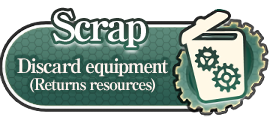
<style>
.page{position:relative;width:270px;height:117px;background:#ffffff}
.page>*{position:absolute;margin:0}
.t1{font:40px "RyuminPro-ExBold";letter-spacing:-0.08em;color:#ffffff}
.t2{font:16px/17px "RyuminPro-ExBold";letter-spacing:-0.08em;color:#fff6f1}
.t3{font:20px/17px "RyuminPro-ExBold";letter-spacing:-0.08em;color:#fff6f1}
</style>
<div class="page">
<p class="t1" style="left:53px;top:10px;width:93px;height:38px">Scrap</p>
<p class="t2" style="left:17px;top:58px;width:151px;height:35px;text-align:center"><span class="t3">Discard equipment<br></span>(Returns resources)</p>
</div>
